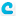
<style>
.page{position:relative;width:16px;height:16px}
.page>*{position:absolute;margin:0}
.t1{font:32.2px "HarlowSolid";color:#00b8e0}
</style>
<div class="page">
<p class="t1" style="left:1px;top:2px;width:12px;height:13px">c</p>
</div>
